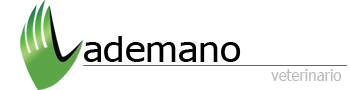
<style>
.page{position:relative;width:350px;height:90px;background:#ffffff}
.page>*{position:absolute;margin:0}
.t1{font:33.7px "Tahoma";color:#000000;scale:1.15 1}
.t2{font:15.6px "Tahoma";color:#bbbaba;scale:0.96 1}
</style>
<div class="page">
<p class="t1" style="left:84px;top:36px;width:157px;height:26px">ademano</p>
<p class="t2" style="left:271px;top:69px;width:71px;height:12px">veterinario</p>
</div>
